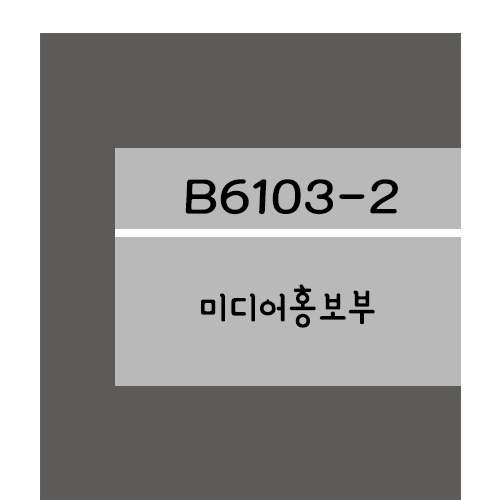
<style>
.page{position:relative;width:500px;height:500px;background:#5d5a5a}
.page>*{position:absolute;margin:0}
.t1{font:61.2px "YanoljaYacheR";color:#000000;scale:1.18 1}
.t2{font:48px "YanoljaYacheR";color:#000000}
</style>
<div class="page">
<p class="t1" style="left:185px;top:179px;width:213px;height:36px">B6103-2</p>
<p class="t2" style="left:201px;top:284px;width:174px;height:44px">미디어홍보부</p>
</div>
